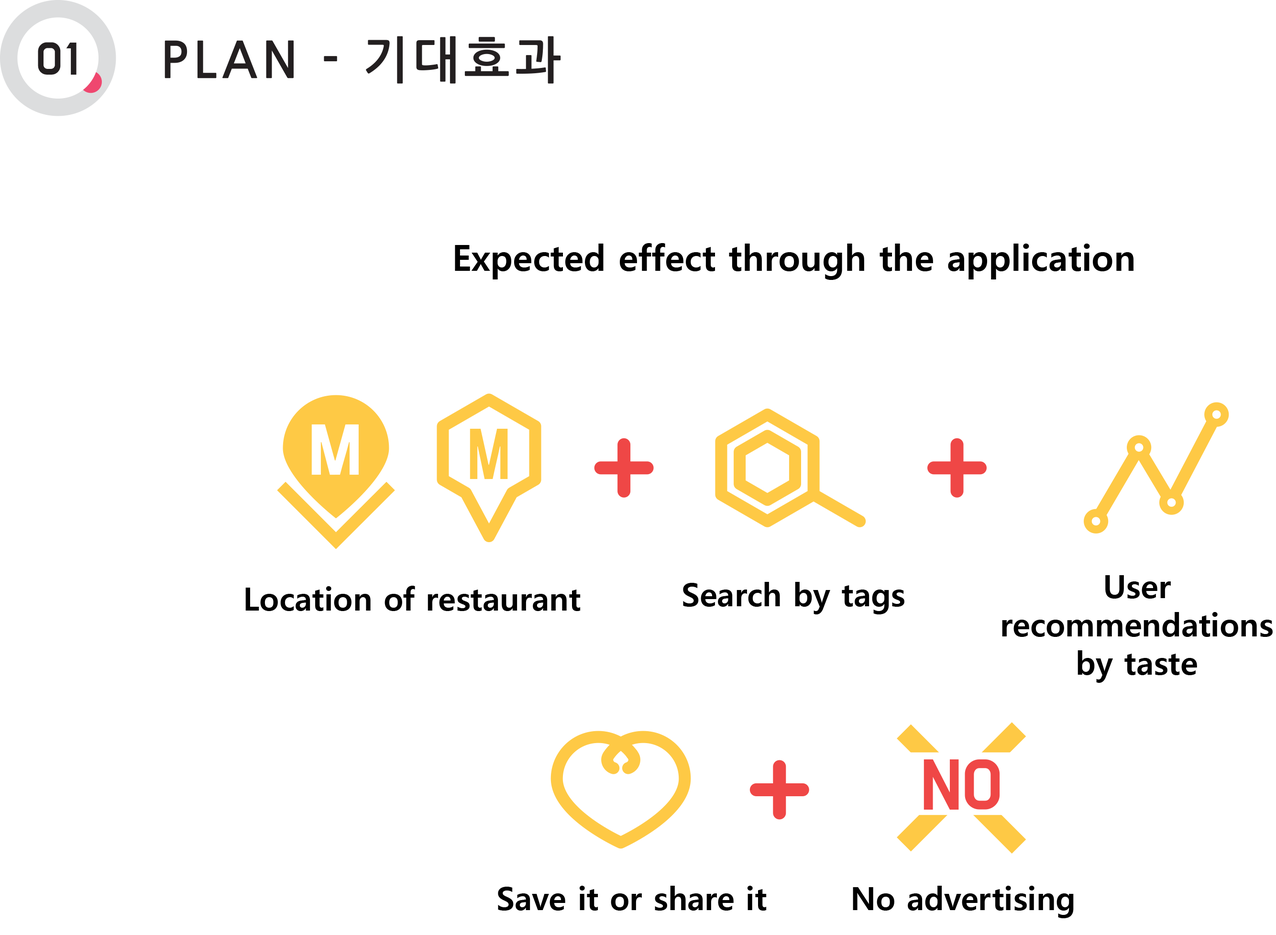
<style>
.page{position:relative;width:1276px;height:935px;background:#ffffff}
.page>*{position:absolute;margin:0}
.t1{font:35.9px "MalgunGothicBold";color:#000000}
.t2{font:31.9px "MalgunGothicBold";color:#000000}
</style>
<div class="page">
<p class="t1" style="left:455px;top:243px;width:678px;height:37px">Expected effect through the application</p>
<p class="t2" style="left:683px;top:582px;width:221px;height:32px">Search by tags</p>
<p class="t2" style="left:1002px;top:575px;width:271px;height:107px;text-align:center">User<br>recommendations<br>by taste</p>
<p class="t2" style="left:245px;top:585px;width:336px;height:26px">Location of restaurant</p>
<p class="t2" style="left:498px;top:885px;width:269px;height:25px">Save it or share it</p>
<p class="t2" style="left:853px;top:885px;width:221px;height:33px">No advertising</p>
</div>
